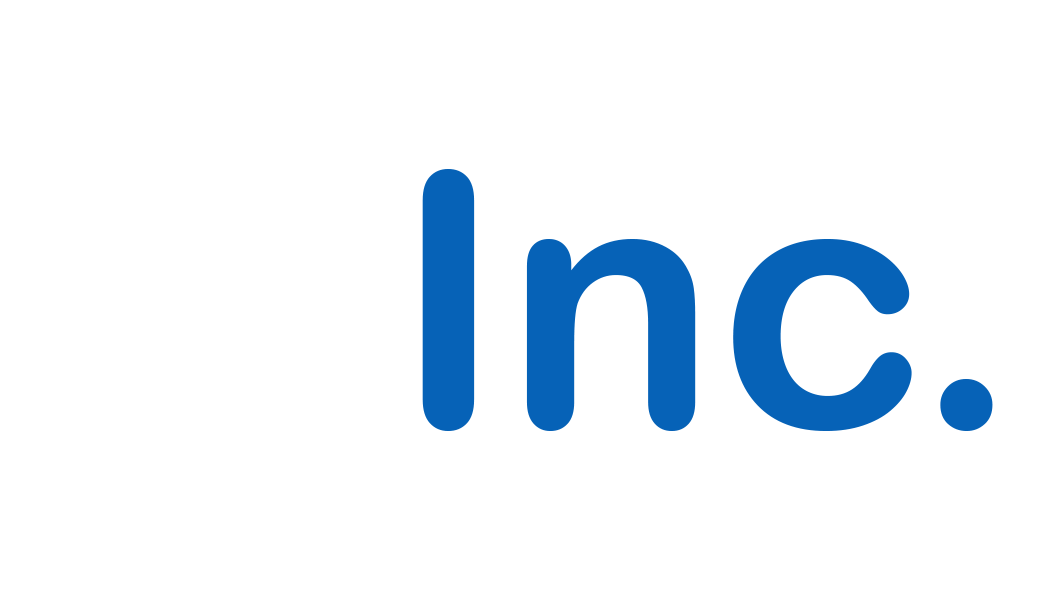
<style>
.page{position:relative;width:1050px;height:600px;background:#ffffff}
.page>*{position:absolute;margin:0}
.t1{font:354.2px "ArialRoundedMTBold";color:#0662b7}
.t2{font:354.2px "ArialRoundedMTBold";color:#ffffff}
</style>
<div class="page">
<p class="t1" style="left:59px;top:169px;width:934px;height:262px"><span class="t2">th</span>Inc.</p>
</div>
